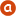
<style>
.page{position:relative;width:16px;height:16px;background:#d1450d}
.page>*{position:absolute;margin:0}
.t1{font:16px "ComicSansMS";color:#ffffff}
</style>
<div class="page">
<p class="t1" style="left:4px;top:4px;width:8px;height:8px">a</p>
</div>
